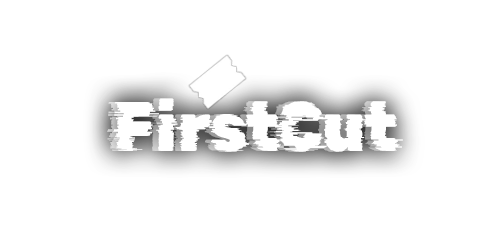
<style>
.page{position:relative;width:500px;height:250px;background:#ffffff}
.page>*{position:absolute;margin:0}
.t1{font:70px "RubikGlitch-Regular";letter-spacing:-0.02em;color:#ffffff;scale:0.9 1}
</style>
<div class="page">
<p class="t1" style="left:107px;top:98px;width:290px;height:54px">FirstCut</p>
<p class="t1" style="left:113px;top:98px;width:290px;height:54px">FirstCut</p>
</div>
